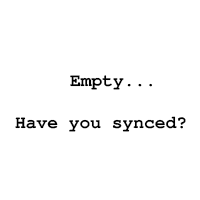
<style>
.page{position:relative;width:200px;height:200px;background:#ffffff}
.page>*{position:absolute;margin:0}
.t1{font:17.9px "FreeMonoBold";color:#000000}
</style>
<div class="page">
<p class="t1" style="left:70px;top:75px;width:82px;height:15px">Empty...</p>
<p class="t1" style="left:15px;top:116px;width:171px;height:16px">Have you synced?</p>
</div>
